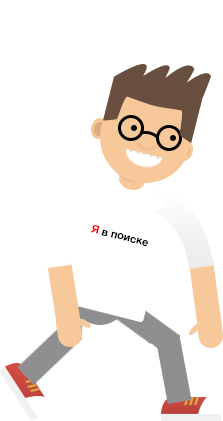
<style>
.page{position:relative;width:223px;height:421px;background:#ffffff}
.page>*{position:absolute;margin:0}
.t1{font:11px "HelveticaNeueCyr-Bold";color:#000000}
.t2{font:11px "HelveticaNeueCyr-Bold";color:#ff0000}
</style>
<div class="page">
<p class="t1" style="left:90px;top:225px;width:58px;height:21px;rotate:14deg"><span class="t2">Я </span>в поиске</p>
</div>
